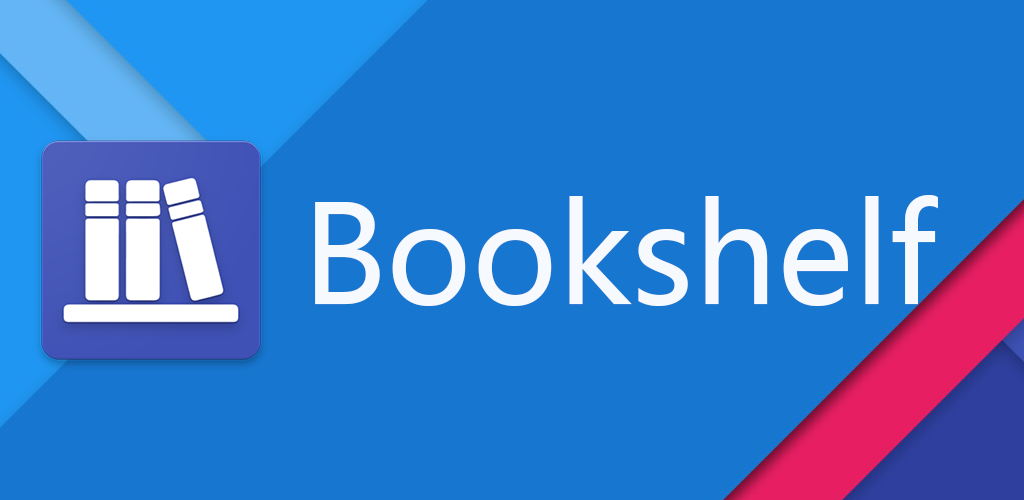
<style>
.page{position:relative;width:1024px;height:500px;background:#1776d0}
.page>*{position:absolute;margin:0}
.t1{font:135px "MicrosoftYaHei";color:#f6f9fe}
</style>
<div class="page">
<p class="t1" style="left:315px;top:195px;width:623px;height:111px">Bookshelf</p>
</div>
